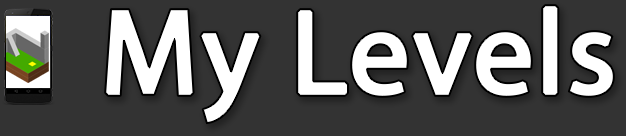
<style>
.page{position:relative;width:626px;height:136px;background:#333333}
.page>*{position:absolute;margin:0}
.t1{font:120.4px "MyriadPro-Regular";color:#ffffff;font-weight:bold}
</style>
<div class="page">
<p class="t1" style="left:105px;top:5px;width:509px;height:119px">My Levels</p>
</div>
